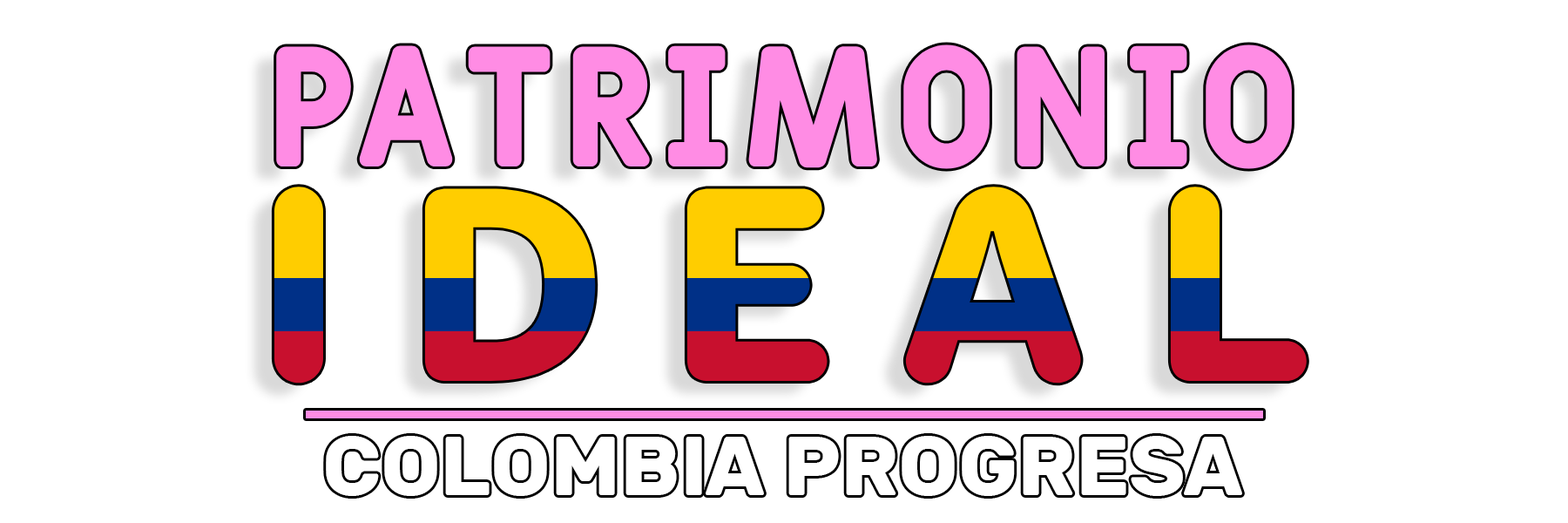
<style>
.page{position:relative;width:1568px;height:523px;background:#ffffff}
.page>*{position:absolute;margin:0}
.t1{font:169.9px "Fulbo-Argenta";color:#ff8ce4}
.t2{font:254.4px "Jellee-Roman"}
.t3{font:83.6px "Rubik-Bold";color:#ffffff}
</style>
<div class="page">
<p class="t1" style="left:276px;top:44px;width:1016px;height:125px">PATRIMONIO</p>
<p class="t2" style="left:274px;top:186px;width:1033px;height:197px">I D E A L</p>
<p class="t3" style="left:326px;top:436px;width:916px;height:60px">COLOMBIA PROGRESA</p>
</div>
